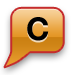
<style>
.page{position:relative;width:75px;height:75px;background:#ffffff}
.page>*{position:absolute;margin:0}
.t1{font:31.3px "HelveticaNeue-Bold";color:#000000}
</style>
<div class="page">
<p class="t1" style="left:27px;top:17px;width:22px;height:24px">C</p>
</div>
